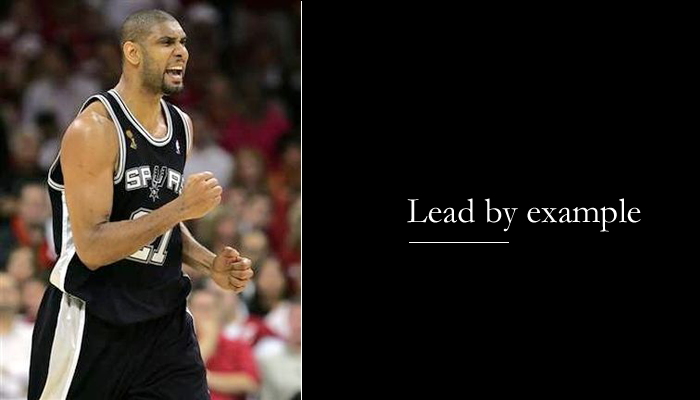
<style>
.page{position:relative;width:700px;height:400px;background:#000000}
.page>*{position:absolute;margin:0}
.t1{font:36px "Garamond";color:#ffffff}
</style>
<div class="page">
<p class="t1" style="left:407px;top:198px;width:234px;height:34px">Lead by example</p>
</div>
